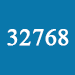
<style>
.page{position:relative;width:75px;height:75px;background:#0977ab}
.page>*{position:absolute;margin:0}
.t1{font:24px "TimesNewRomanPSMT";color:#ffffff;font-weight:bold}
</style>
<div class="page">
<p class="t1" style="left:7px;top:29px;width:62px;height:17px">32768</p>
</div>
